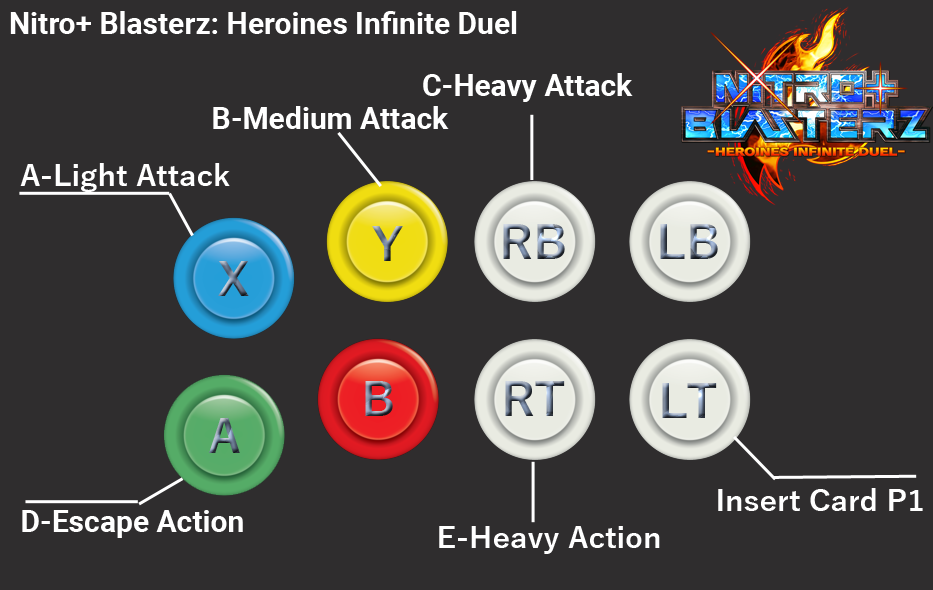
<style>
.page{position:relative;width:933px;height:590px;background:#2f2d2e}
.page>*{position:absolute;margin:0}
.t1{font:30px "Roboto-Bold";color:#ffffff}
.t2{font:30px "YuGothic-Bold";color:#ffffff}
</style>
<div class="page">
<p class="t1" style="left:10px;top:11px;width:507px;height:23px">Nitro+ Blasterz: Heroines Infinite Duel</p>
<p class="t1" style="left:423px;top:73px;width:210px;height:29px">C-Heavy Attack</p>
<p class="t1" style="left:213px;top:106px;width:236px;height:23px">B-Medium Attack</p>
<p class="t2" style="left:20px;top:163px;width:210px;height:29px">A-Light Attack</p>
<p class="t2" style="left:718px;top:488px;width:205px;height:23px">Insert Card P1</p>
<p class="t1" style="left:22px;top:510px;width:221px;height:28px">D-Escape Action</p>
<p class="t2" style="left:439px;top:526px;width:221px;height:28px">E-Heavy Action</p>
</div>
